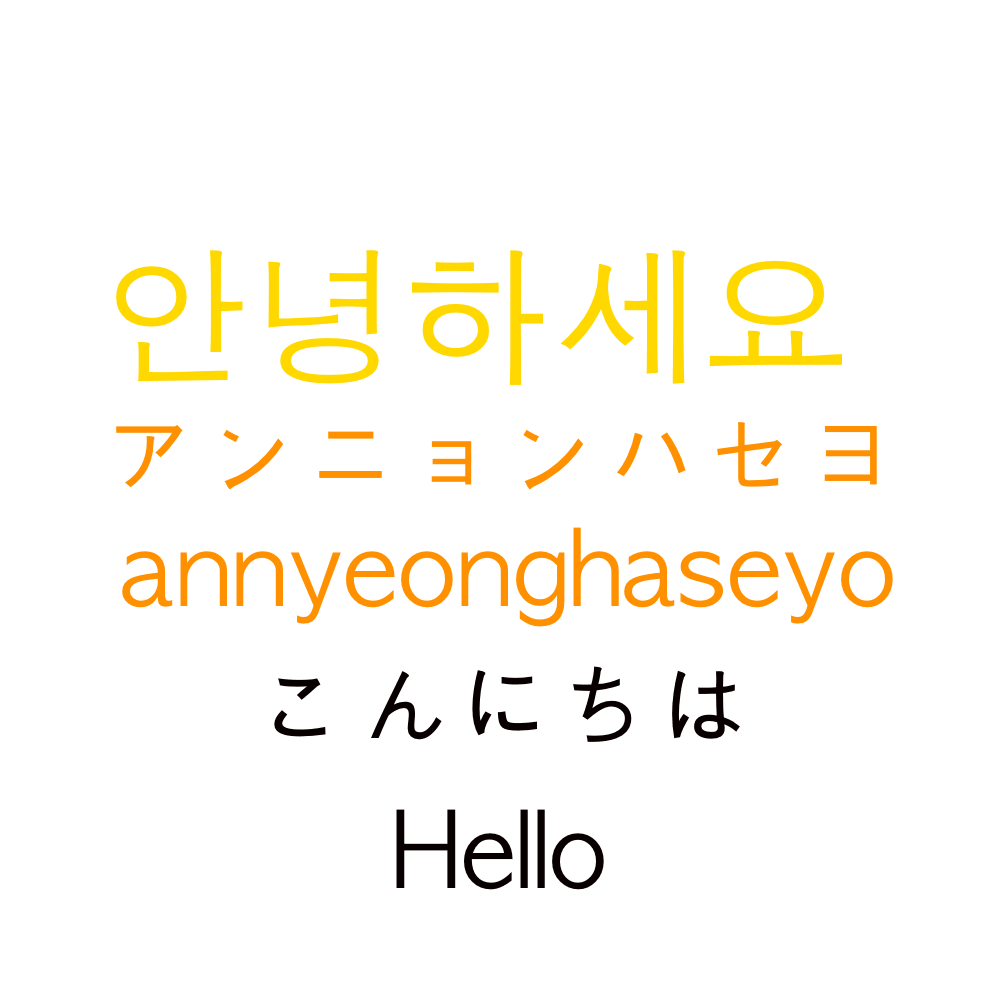
<style>
.page{position:relative;width:1000px;height:1000px;background:#ffffff}
.page>*{position:absolute;margin:0}
.t1{font:100px "AppleGothic";color:#ff9000}
.t2{font:150px "AppleGothic";color:#ffd800}
.t3{font:100px "AppleGothic";color:#080000}
</style>
<div class="page">
<p class="t1" style="left:116px;top:250px;width:761px;height:240px"><span class="t2">안녕하세요<br></span>アンニョンハセヨ</p>
<p class="t1" style="left:122px;top:527px;width:771px;height:100px">annyeonghaseyo</p>
<p class="t3" style="left:274px;top:666px;width:466px;height:76px">こんにちは</p>
<p class="t3" style="left:396px;top:809px;width:208px;height:81px">Hello</p>
</div>
